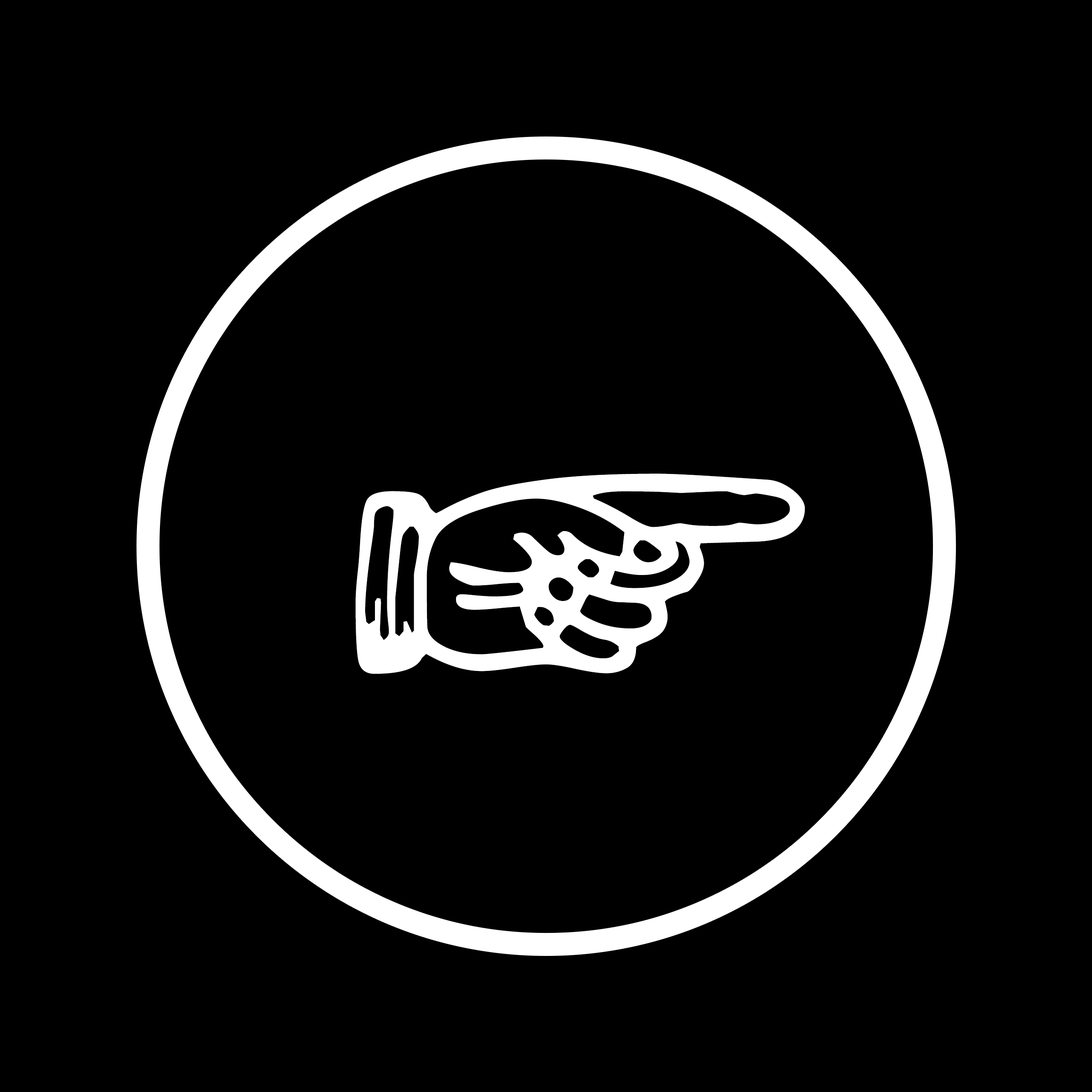
<style>
.page{position:relative;width:1092px;height:1092px;background:#000000}
.page>*{position:absolute;margin:0}
.t1{font:263px "LucidaGrande";color:#000000}
.t2{font:551px "ArialUnicodeMS";color:#ffffff}
</style>
<div class="page">
<p class="t1" style="left:355px;top:473px;width:450px;height:201px">︎<span class="t2">☞</span></p>
</div>
